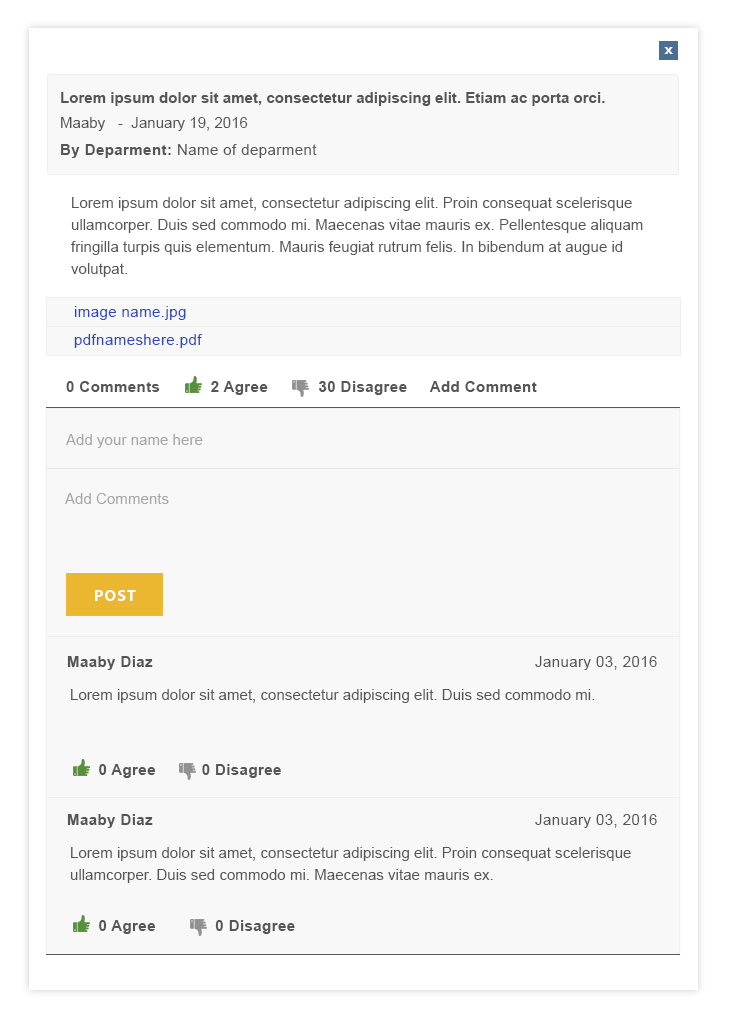
<style>
.page{position:relative;width:733px;height:1029px;background:#f8f8f8}
.page>*{position:absolute;margin:0}
.t1{font:9.3px "Roboto-Black";letter-spacing:0.02em;color:#ffffff;scale:1.35 1}
.t2{font:15.1px/25px "Arial-BoldMT";color:#555555}
.t3{font:15.1px/25px "ArialMT";color:#555555}
.t4{font:15.1px "ArialMT";letter-spacing:0.025em;color:#555555}
.t5{font:15.1px "Arial-BoldMT";letter-spacing:0.025em;color:#555555}
.t6{font:15.1px/22px "ArialMT";color:#555555}
.t7{font:15.1px "ArialMT";letter-spacing:0.025em;color:#2a46c1}
.t8{font:15.1px "ArialMT";color:#a5a5a5}
.t9{font:16px "MyriadPro-Bold";letter-spacing:0.075em;color:#ffffff}
.t10{font:15.1px "ArialMT";color:#555555}
</style>
<div class="page">
<p class="t1" style="left:664px;top:47px;width:9px;height:7px">X</p>
<p class="t2" style="left:61px;top:92px;width:544px;height:39px">Lorem ipsum dolor sit amet, consectetur adipiscing elit. Etiam ac porta orci.<span class="t3"> <br>Maaby   -  January 19, 2016</span></p>
<p class="t4" style="left:61px;top:144px;width:256px;height:14px"><span class="t5">By Deparment: </span>Name of deparment</p>
<p class="t6" style="left:71px;top:197px;width:572px;height:80px">Lorem ipsum dolor sit amet, consectetur adipiscing elit. Proin consequat scelerisque ullamcorper. Duis sed commodo mi. Maecenas vitae mauris ex. Pellentesque aliquam fringilla turpis quis elementum. Mauris feugiat rutrum felis. In bibendum at augue id volutpat.</p>
<p class="t7" style="left:74px;top:306px;width:112px;height:14px">image name.jpg</p>
<p class="t7" style="left:74px;top:334px;width:128px;height:14px">pdfnameshere.pdf</p>
<p class="t5" style="left:66px;top:381px;width:471px;height:14px">0 Comments           2 Agree           30 Disagree     Add Comment</p>
<p class="t8" style="left:66px;top:434px;width:137px;height:14px">Add your name here</p>
<p class="t8" style="left:65px;top:493px;width:104px;height:11px">Add Comments</p>
<p class="t9" style="left:95px;top:590px;width:41px;height:11px">POST</p>
<p class="t4" style="left:67px;top:656px;width:590px;height:14px"><span class="t5">Maaby Diaz</span>            January 03, 2016</p>
<p class="t10" style="left:71px;top:689px;width:524px;height:14px">Lorem ipsum dolor sit amet, consectetur adipiscing elit. Duis sed commodo mi.</p>
<p class="t5" style="left:99px;top:764px;width:182px;height:14px">0 Agree          0 Disagree</p>
<p class="t4" style="left:67px;top:814px;width:590px;height:14px"><span class="t5">Maaby Diaz</span>            January 03, 2016</p>
<p class="t6" style="left:70px;top:847px;width:561px;height:36px">Lorem ipsum dolor sit amet, consectetur adipiscing elit. Proin consequat scelerisque ullamcorper. Duis sed commodo mi. Maecenas vitae mauris ex.</p>
<p class="t5" style="left:99px;top:920px;width:196px;height:14px">0 Agree             0 Disagree</p>
</div>
